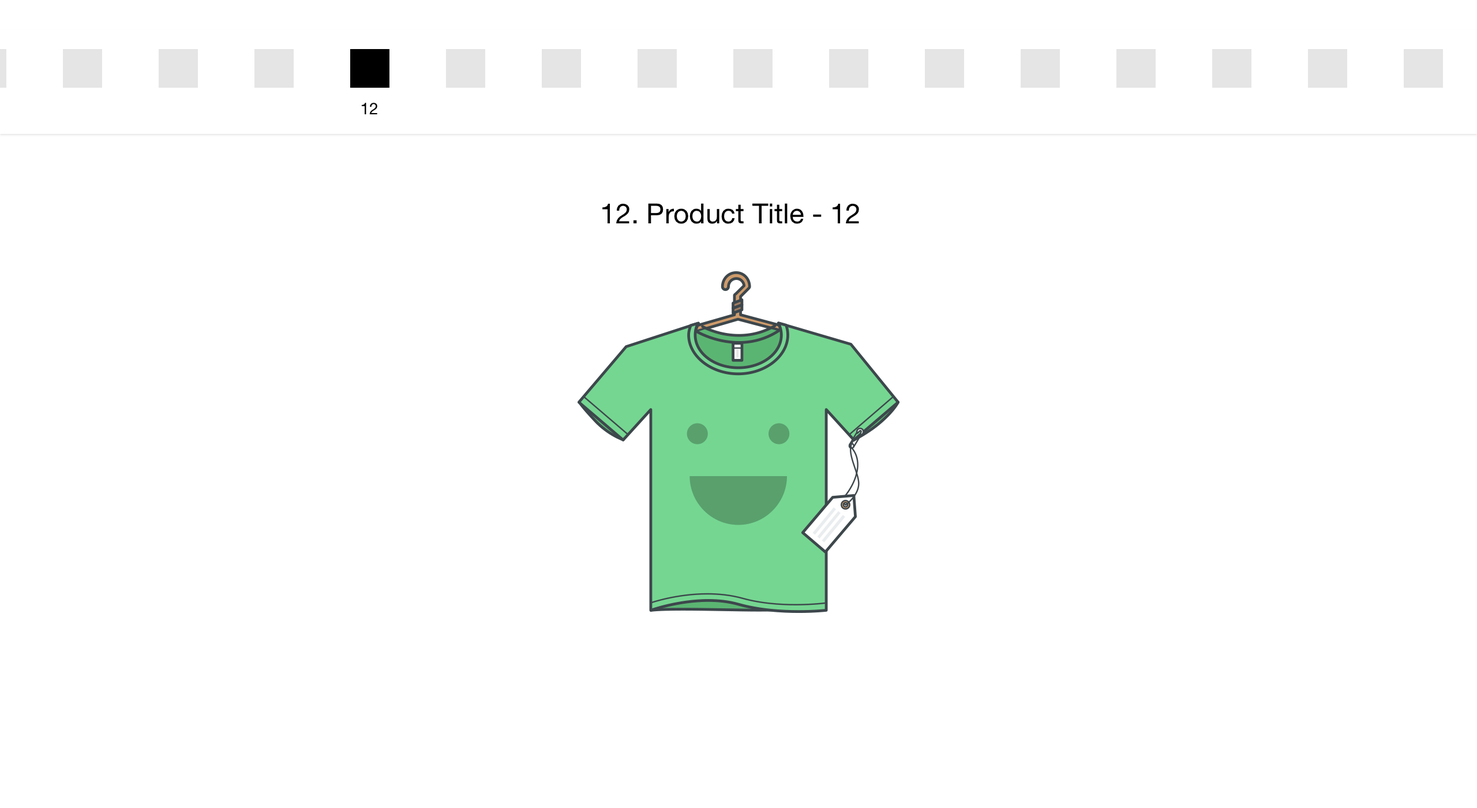
<style>
.page{position:relative;width:1477px;height:808px;background:#ffffff}
.page>*{position:absolute;margin:0}
.t1{font:16.2px "HelveticaNeue";color:#000000}
.t2{font:27.7px "HelveticaNeue";color:#000000}
</style>
<div class="page">
<p class="t1" style="left:361px;top:103px;width:16px;height:11px">12</p>
<p class="t2" style="left:602px;top:203px;width:257px;height:21px">12. Product Title - 12</p>
</div>
